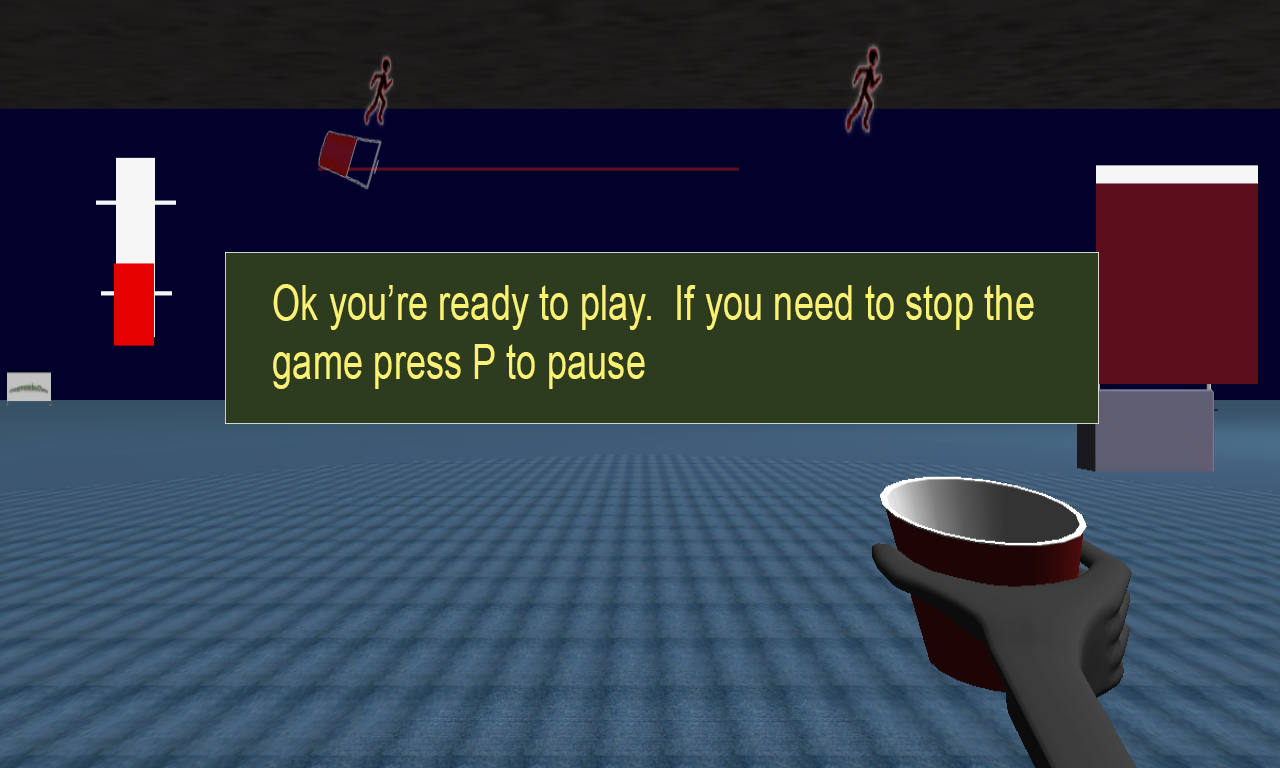
<style>
.page{position:relative;width:1280px;height:768px}
.page>*{position:absolute;margin:0}
.t1{font:48.9px "ArialMT";color:#fbf174;scale:0.75 1}
</style>
<div class="page">
<p class="t1" style="left:273px;top:284px;width:761px;height:105px">Ok you’re ready to play.  If you need to stop the game press P to pause</p>
</div>
